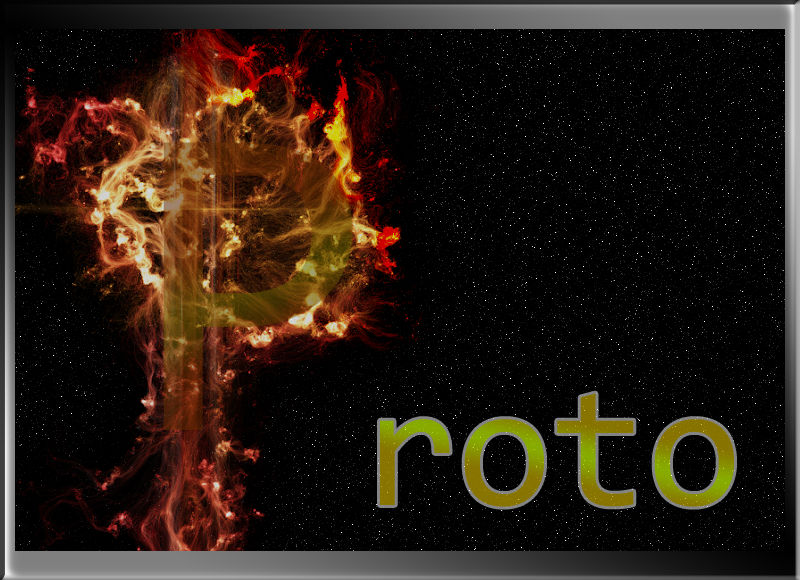
<style>
.page{position:relative;width:800px;height:580px;background:#000000}
.page>*{position:absolute;margin:0}
.t1{font:450px "Consolas"}
.t2{font:172px "Consolas"}
</style>
<div class="page">
<p class="t1" style="left:163px;top:142px;width:190px;height:288px">P</p>
<p class="t2" style="left:380px;top:393px;width:354px;height:114px">roto</p>
</div>
